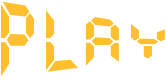
<style>
.page{position:relative;width:166px;height:81px;background:#ffffff}
.page>*{position:absolute;margin:0}
.t1{font:75px "QuartzMS";color:#ffbf2e;scale:0.96 1}
</style>
<div class="page">
<p class="t1" style="left:0px;top:1px;width:165px;height:76px">PLAY</p>
</div>
